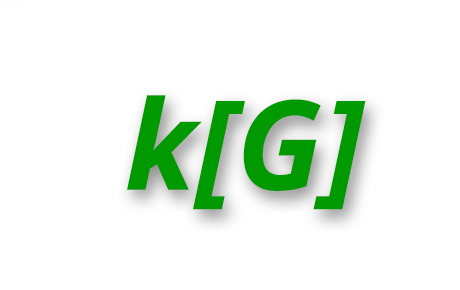
<style>
.page{position:relative;width:460px;height:290px;background:#ffffff}
.page>*{position:absolute;margin:0}
.t1{font:124px "OpenSans-BoldItalic";color:#009900}
</style>
<div class="page">
<p class="t1" style="left:127px;top:95px;width:239px;height:115px">k[G]</p>
</div>
